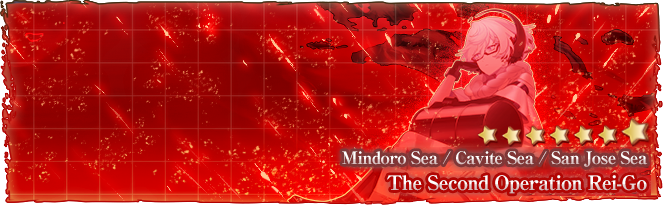
<style>
.page{position:relative;width:663px;height:205px}
.page>*{position:absolute;margin:0}
.t1{font:17px "RyuminPro-ExBold";letter-spacing:-0.04em}
.t2{font:20px "RyuminPro-ExBold";letter-spacing:-0.04em}
</style>
<div class="page">
<p class="t1" style="left:342px;top:151px;width:306px;height:16px">Mindoro Sea / Cavite Sea / San Jose Sea</p>
<p class="t2" style="left:387px;top:175px;width:260px;height:19px">The Second Operation Rei-Go</p>
</div>
